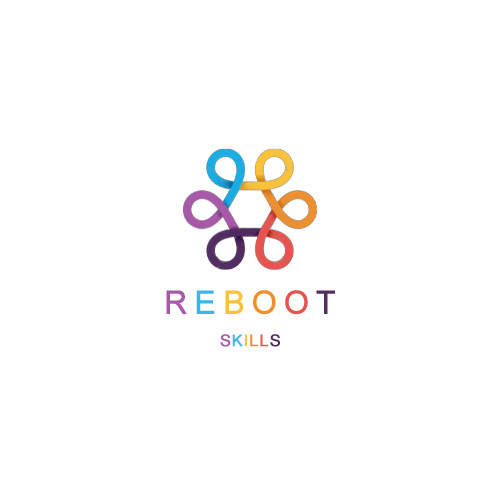
<style>
.page{position:relative;width:500px;height:500px;background:#ffffff}
.page>*{position:absolute;margin:0}
.t1{font:32px "ArialMT";letter-spacing:0.2em;color:#a959a9;font-weight:bold}
.t2{font:32px "ArialMT";letter-spacing:0.2em;color:#3db5e6;font-weight:bold}
.t3{font:32px "ArialMT";letter-spacing:0.2em;color:#f9c13a;font-weight:bold}
.t4{font:32px "ArialMT";letter-spacing:0.2em;color:#ef8f2d;font-weight:bold}
.t5{font:32px "ArialMT";letter-spacing:0.2em;color:#e45551;font-weight:bold}
.t6{font:32px "ArialMT";letter-spacing:0.2em;color:#512d61;font-weight:bold}
.t7{font:16px "ArialMT";letter-spacing:0.05em;color:#a959a9;font-weight:bold}
.t8{font:16px "ArialMT";letter-spacing:0.05em;color:#3db5e6;font-weight:bold}
.t9{font:16px "ArialMT";letter-spacing:0.05em;color:#f9c13a;font-weight:bold}
.t10{font:16px "ArialMT";letter-spacing:0.05em;color:#ef8f2d;font-weight:bold}
.t11{font:16px "ArialMT";letter-spacing:0.05em;color:#e45551;font-weight:bold}
.t12{font:16px "ArialMT";letter-spacing:0.05em;color:#512d61;font-weight:bold}
</style>
<div class="page">
<p class="t1" style="left:166px;top:290px;width:169px;height:25px">R<span class="t2">E</span><span class="t3">B</span><span class="t4">O</span><span class="t5">O</span><span class="t6">T</span></p>
<p class="t7" style="left:220px;top:334px;width:60px;height:13px">S<span class="t8">K</span><span class="t9">I</span><span class="t10">L</span><span class="t11">L</span><span class="t12">S</span></p>
</div>
